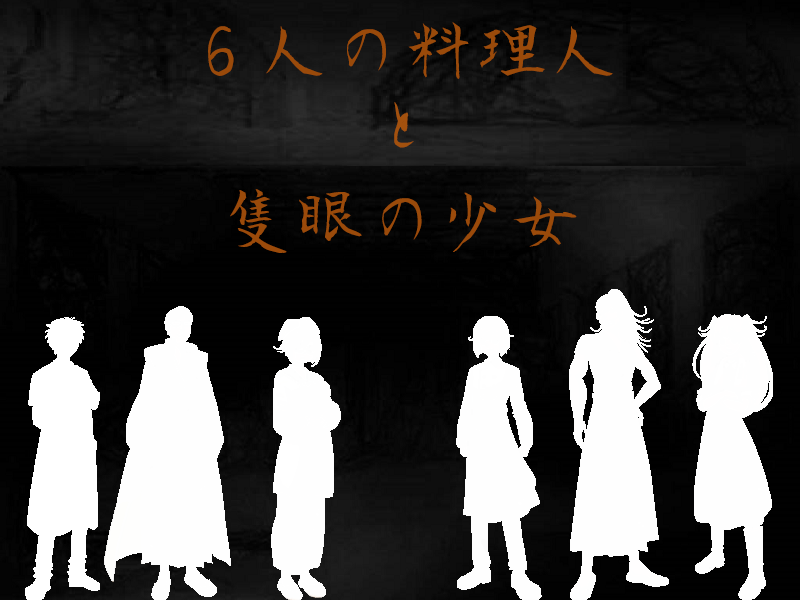
<style>
.page{position:relative;width:800px;height:600px}
.page>*{position:absolute;margin:0}
.t1{font:72px "AoyagiKouzanFontT";color:#9a4a0a}
.t2{font:72px "AoyagiKouzanFontT";color:#a3510e}
</style>
<div class="page">
<p class="t1" style="left:208px;top:22px;width:405px;height:57px">６人の料理人</p>
<p class="t2" style="left:394px;top:102px;width:20px;height:46px">と</p>
<p class="t1" style="left:230px;top:189px;width:347px;height:64px">隻眼の少女</p>
</div>
